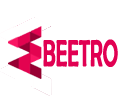
<style>
.page{position:relative;width:126px;height:100px;background:#ffffff}
.page>*{position:absolute;margin:0}
.t1{font:37.3px "BerlinSansFB-Reg";color:#e10052;font-weight:bold;scale:0.55 1}
</style>
<div class="page">
<p class="t1" style="left:43px;top:39px;width:75px;height:28px">BEETRO</p>
</div>
